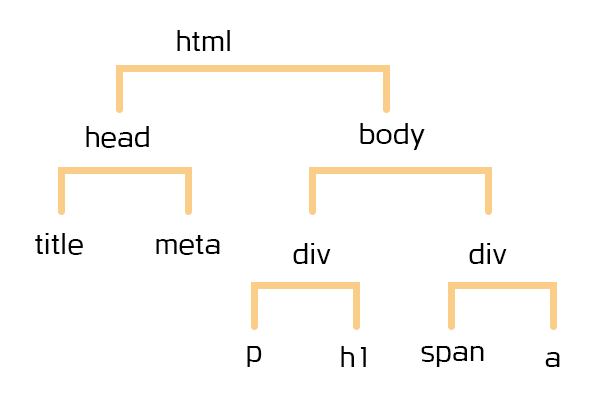
<style>
.page{position:relative;width:600px;height:400px;background:#ffffff}
.page>*{position:absolute;margin:0}
.t1{font:29.2px "DakiB";color:#000000}
</style>
<div class="page">
<p class="t1" style="left:177px;top:30px;width:53px;height:21px">html</p>
<p class="t1" style="left:86px;top:126px;width:63px;height:22px">head</p>
<p class="t1" style="left:360px;top:123px;width:65px;height:27px">body</p>
<p class="t1" style="left:35px;top:233px;width:48px;height:22px">title</p>
<p class="t1" style="left:156px;top:235px;width:64px;height:20px">meta</p>
<p class="t1" style="left:293px;top:243px;width:38px;height:21px">div</p>
<p class="t1" style="left:469px;top:243px;width:38px;height:21px">div</p>
<p class="t1" style="left:247px;top:346px;width:15px;height:21px">p</p>
<p class="t1" style="left:341px;top:346px;width:25px;height:21px">h1</p>
<p class="t1" style="left:421px;top:346px;width:63px;height:21px">span</p>
<p class="t1" style="left:545px;top:352px;width:15px;height:15px">a</p>
</div>
